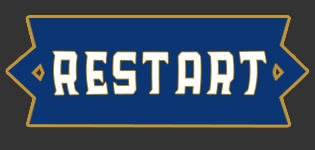
<style>
.page{position:relative;width:315px;height:150px;background:#0c3573}
.page>*{position:absolute;margin:0}
.t1{font:62.5px "Lorde-Havana";letter-spacing:0.1em;color:#ffffff;scale:0.75 1}
</style>
<div class="page">
<p class="t1" style="left:53px;top:51px;width:213px;height:44px">RESTART</p>
</div>
